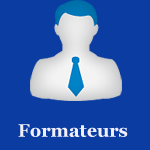
<style>
.page{position:relative;width:150px;height:150px;background:#0a3ca2}
.page>*{position:absolute;margin:0}
.t1{font:18px "Vani-Bold";color:#f2eff9}
</style>
<div class="page">
<p class="t1" style="left:18px;top:124px;width:110px;height:13px">Formateurs</p>
</div>
